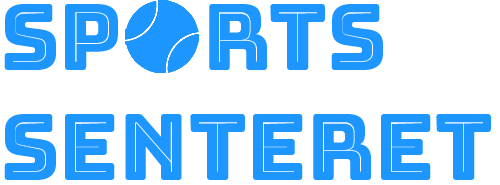
<style>
.page{position:relative;width:500px;height:185px;background:#ffffff}
.page>*{position:absolute;margin:0}
.t1{font:91.1px "Bungee-Inline";color:#1d96ff}
</style>
<div class="page">
<p class="t1" style="left:4px;top:4px;width:487px;height:176px">SP    RTS<br>SENTErET</p>
</div>
